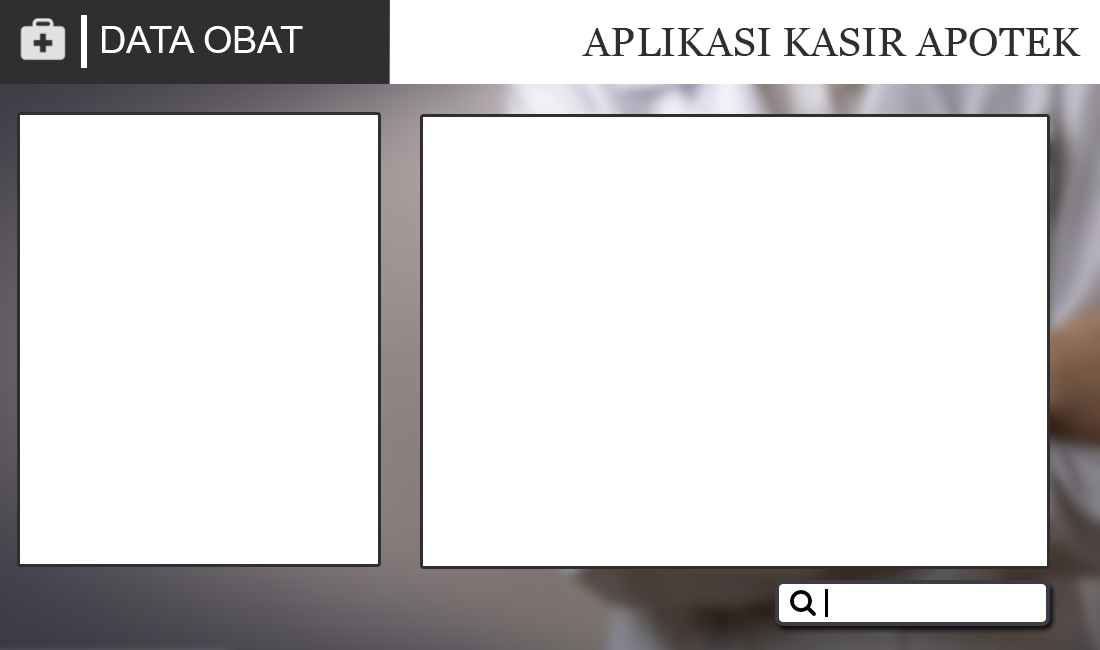
<style>
.page{position:relative;width:1100px;height:650px;background:#ffffff}
.page>*{position:absolute;margin:0}
.t1{font:38px "ArialMT";color:#ffffff}
.t2{font:40px "Georgia";color:#312e30}
</style>
<div class="page">
<p class="t1" style="left:102px;top:26px;width:201px;height:27px">DATA OBAT</p>
<p class="t2" style="left:582px;top:28px;width:499px;height:28px">APLIKASI KASIR APOTEK</p>
</div>
